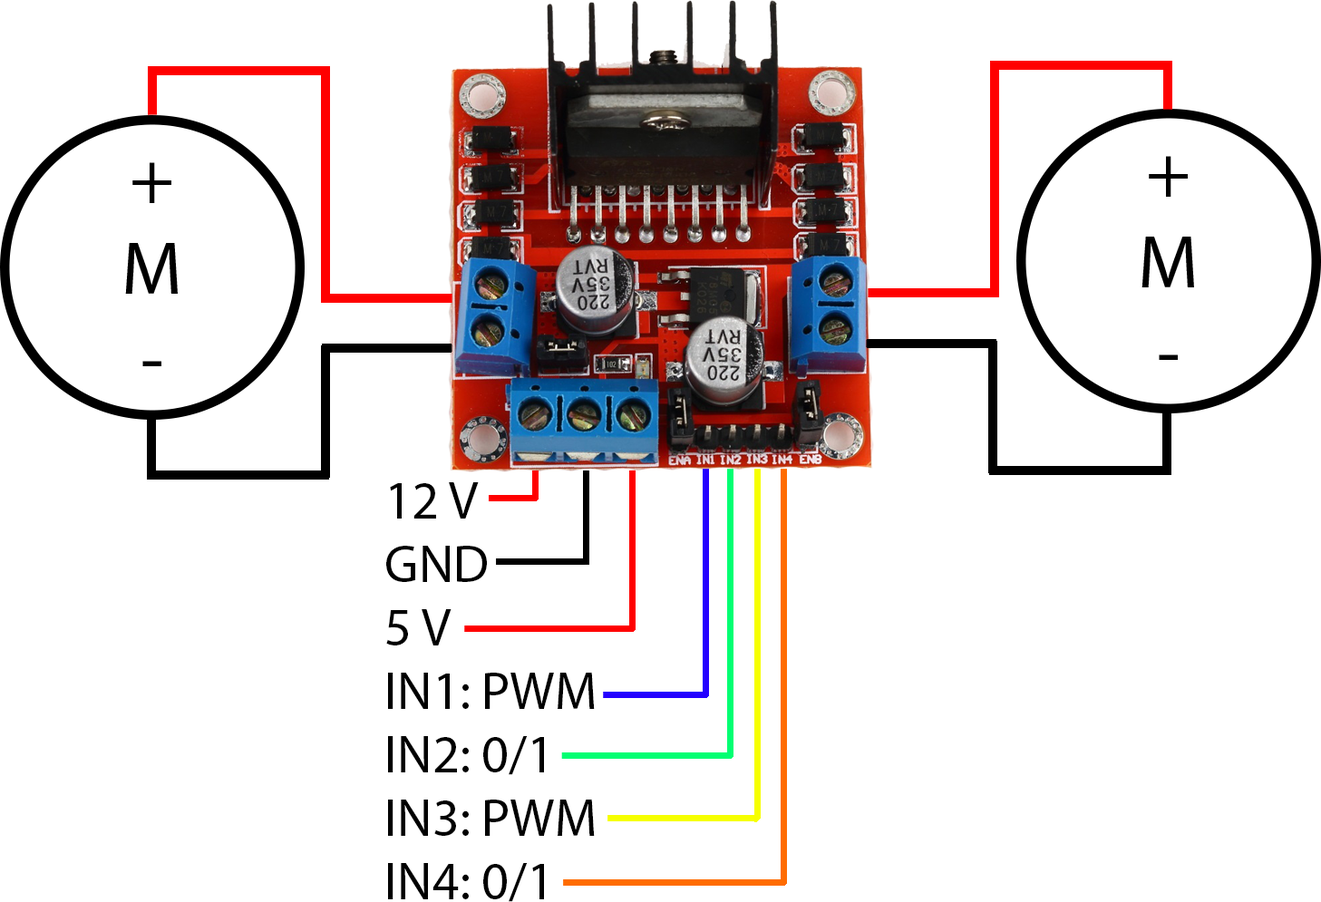
<style>
.page{position:relative;width:1321px;height:902px;background:#ffffff}
.page>*{position:absolute;margin:0}
.t1{font:52.9px "MyriadPro-Regular";color:#000000}
</style>
<div class="page">
<p class="t1" style="left:386px;top:482px;width:209px;height:420px">12 V<br>GND<br>5 V<br>IN1: PWM<br>IN2: 0/1<br>IN3: PWM<br>IN4: 0/1</p>
</div>
